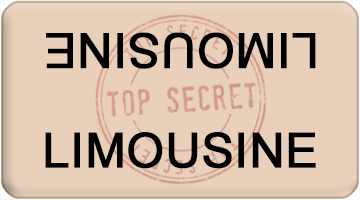
<style>
.page{position:relative;width:360px;height:200px;background:#e8d0bb}
.page>*{position:absolute;margin:0}
.t1{font:48px "ArialMT";color:#000000;font-weight:bold}
</style>
<div class="page">
<p class="t1" style="left:46px;top:32px;width:270px;height:37px;rotate:180deg">LIMOUSINE</p>
<p class="t1" style="left:45px;top:132px;width:271px;height:37px">LIMOUSINE</p>
</div>
